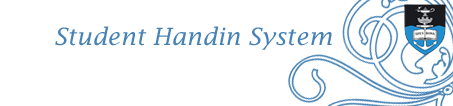
<style>
.page{position:relative;width:453px;height:106px;background:#ffffff}
.page>*{position:absolute;margin:0}
.t1{font:24px "LucidaFax-Italic";color:#4682b4}
</style>
<div class="page">
<p class="t1" style="left:55px;top:26px;width:277px;height:24px">Student Handin System</p>
</div>
